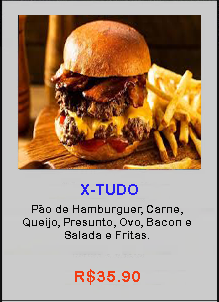
<style>
.page{position:relative;width:219px;height:302px;background:#cbcbcb}
.page>*{position:absolute;margin:0}
.t1{font:14.7px "Arial-BoldMT";color:#261cf4}
.t2{font:10.7px "ArialRoundedMTBold";color:#090909}
.t3{font:16px "ArialRoundedMTBold";color:#f33c12}
</style>
<div class="page">
<p class="t1" style="left:81px;top:184px;width:57px;height:11px">X-TUDO</p>
<p class="t2" style="left:23px;top:205px;width:168px;height:34px;text-align:center">Pão de Hamburguer, Carne, Queijo, Presunto, Ovo, Bacon e Salada e Fritas.</p>
<p class="t3" style="left:75px;top:269px;width:65px;height:16px">R$35.90</p>
</div>
